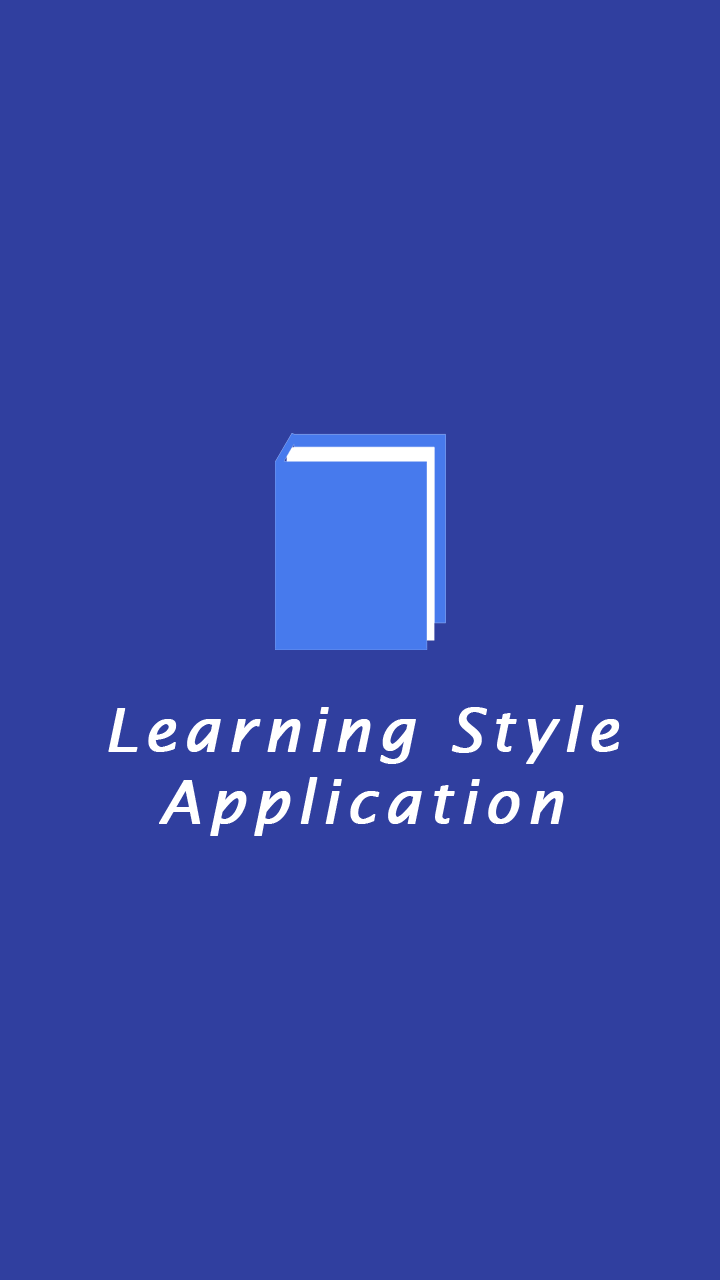
<style>
.page{position:relative;width:720px;height:1280px;background:#303f9f}
.page>*{position:absolute;margin:0}
.t1{font:60px "LucidaSans-Italic";letter-spacing:0.1em;color:#ffffff;font-weight:bold}
</style>
<div class="page">
<p class="t1" style="left:108px;top:705px;width:512px;height:131px;text-align:center">Learning Style<br>Application</p>
</div>
